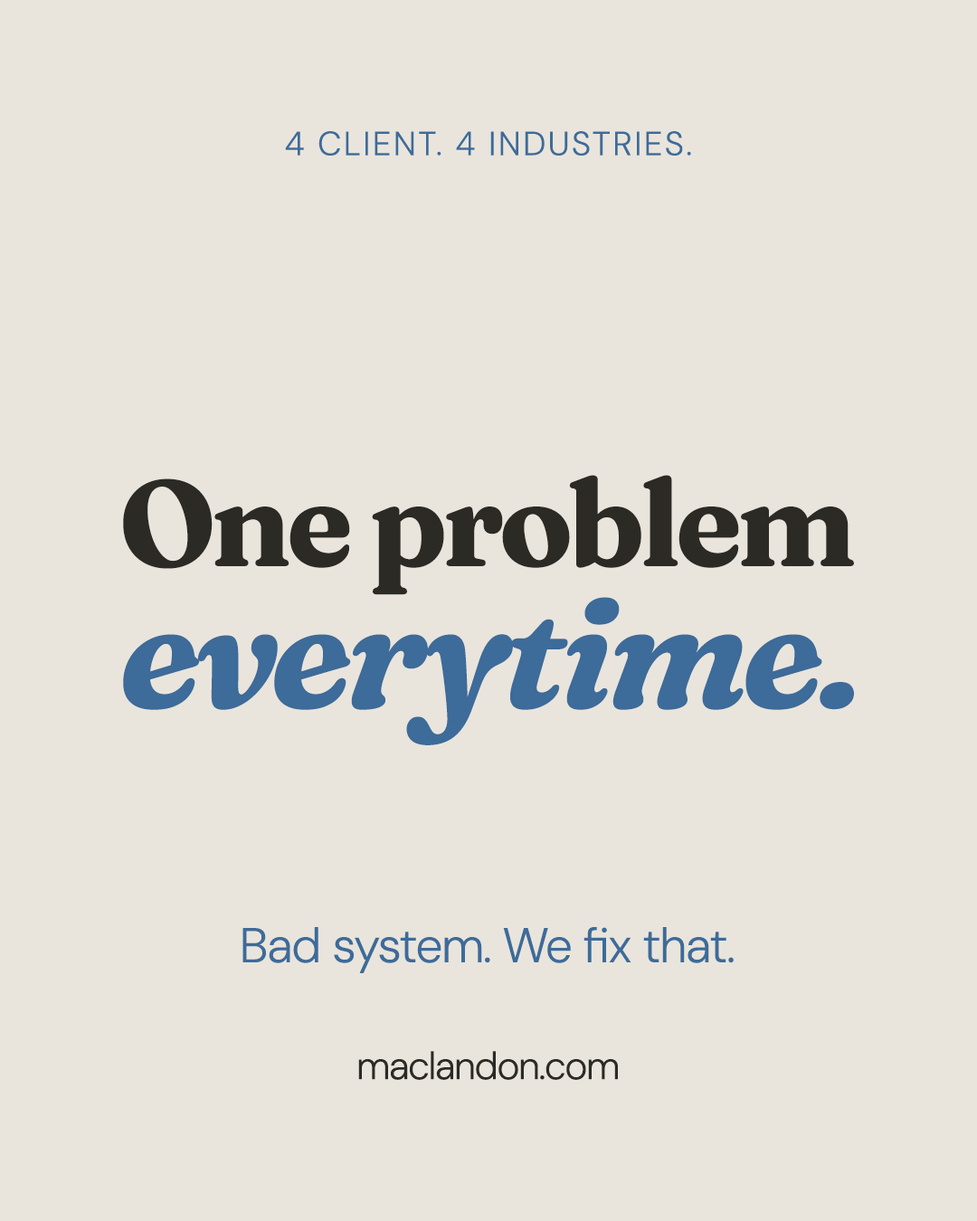
<style>
.page{position:relative;width:977px;height:1221px;background:#e9e5dc}
.page>*{position:absolute;margin:0}
.t1{font:33.4px "DMSans-Light";letter-spacing:0.06em;color:#3d6b9a}
.t2{font:15.9px "Fraunces-Bold";letter-spacing:-0.04em;color:#2b2a25}
.t3{font:15.9px "Fraunces-BoldItalic";letter-spacing:-0.04em;color:#3d6b9a}
.t4{font:48.8px "DMSans-Light";letter-spacing:-0.03em;color:#3d6b9a}
.t5{font:38.9px "DMSans-Light";letter-spacing:-0.04em;color:#2b2a25}
</style>
<div class="page">
<p class="t1" style="left:285px;top:131px;width:406px;height:25px">4 CLIENT. 4 INDUSTRIES.</p>
<p class="t2" style="left:123px;top:475px;width:731px;height:270px;text-align:center">One problem<br><span class="t3">everytime.</span></p>
<p class="t4" style="left:242px;top:927px;width:491px;height:46px">Bad system. We fix that.</p>
<p class="t5" style="left:358px;top:1051px;width:260px;height:29px">maclandon.com</p>
<p class="t5" style="left:359px;top:1051px;width:260px;height:29px">maclandon.com</p>
</div>
